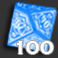
<style>
.page{position:relative;width:58px;height:58px}
.page>*{position:absolute;margin:0}
.t1{font:20px "CopperplateGothic-Bold";color:#ffffff}
</style>
<div class="page">
<p class="t1" style="left:17px;top:41px;width:37px;height:13px">100</p>
</div>
